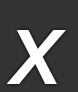
<style>
.page{position:relative;width:78px;height:92px;background:#333333}
.page>*{position:absolute;margin:0}
.t1{font:109.6px "ProductSans-Italic";color:#ffffff}
</style>
<div class="page">
<p class="t1" style="left:6px;top:30px;width:60px;height:54px">x</p>
</div>
